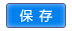
<style>
.page{position:relative;width:72px;height:31px}
.page>*{position:absolute;margin:0}
.t1{font:13px "MicrosoftYaHei";letter-spacing:0.5em;color:#ffffff}
</style>
<div class="page">
<p class="t1" style="left:19px;top:9px;width:34px;height:13px">保存</p>
</div>
